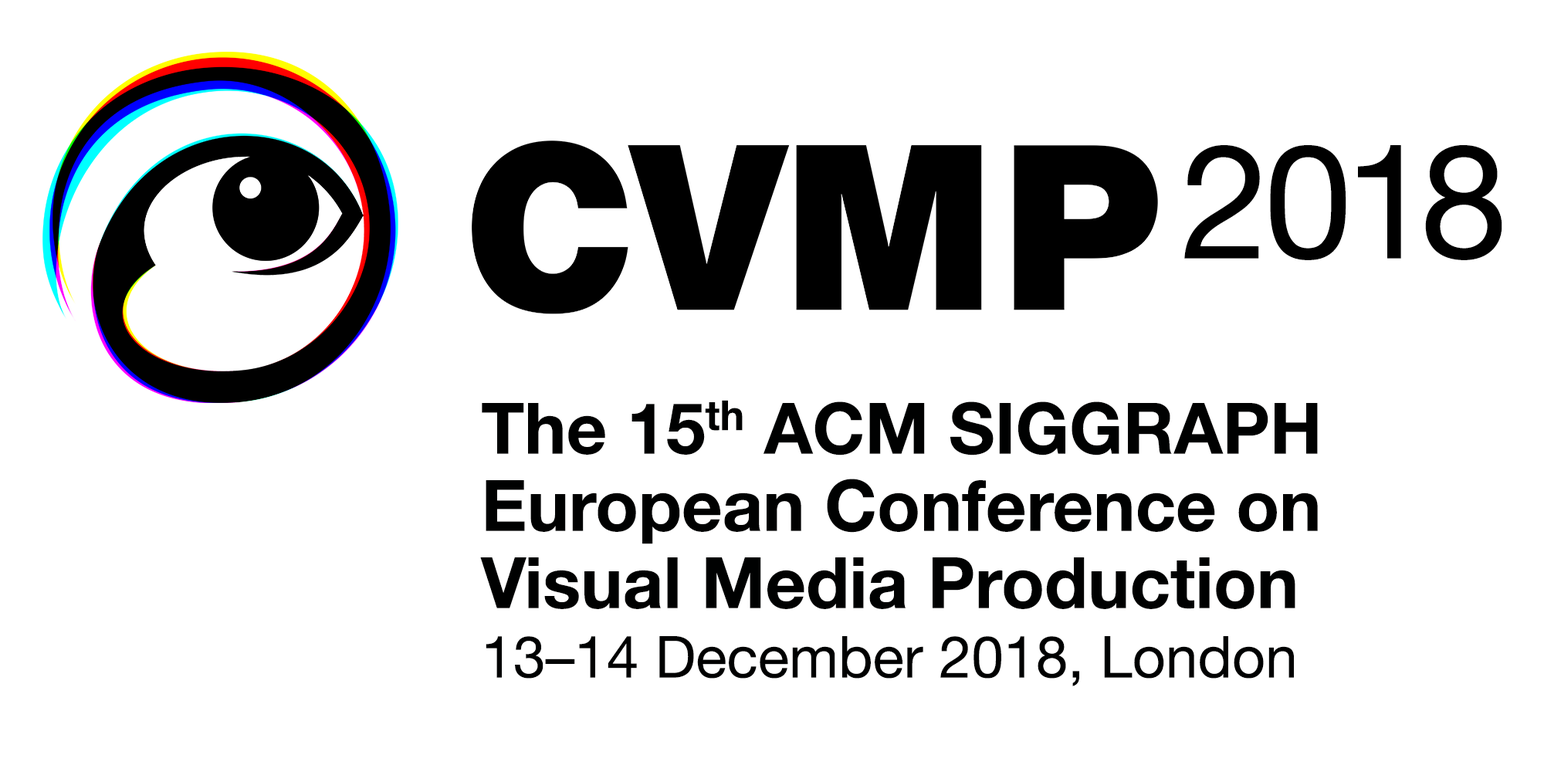
<style>
.page{position:relative;width:1544px;height:772px;background:#ffffff}
.page>*{position:absolute;margin:0}
.t1{font:233.3px "HelveticaBQ-Black";letter-spacing:-0.02em;color:#000000;scale:0.95 1}
.t2{font:159.6px "HelveticaNeue";color:#000000}
.t3{font:70.8px/77.2px "HelveticaNeue-Bold";color:#000000}
.t4{font:57.9px "HelveticaNeue";color:#000000}
</style>
<div class="page">
<p class="t1" style="left:472px;top:141px;width:686px;height:173px">CVMP</p>
<p class="t2" style="left:1184px;top:145px;width:319px;height:115px">2018</p>
<p class="t3" style="left:480px;top:400px;width:838px;height:286px">The 15th ACM SIGGRAPH<br>European Conference on<br>Visual Media Production<br><span class="t4">13–14 December 2018, London</span></p>
</div>
